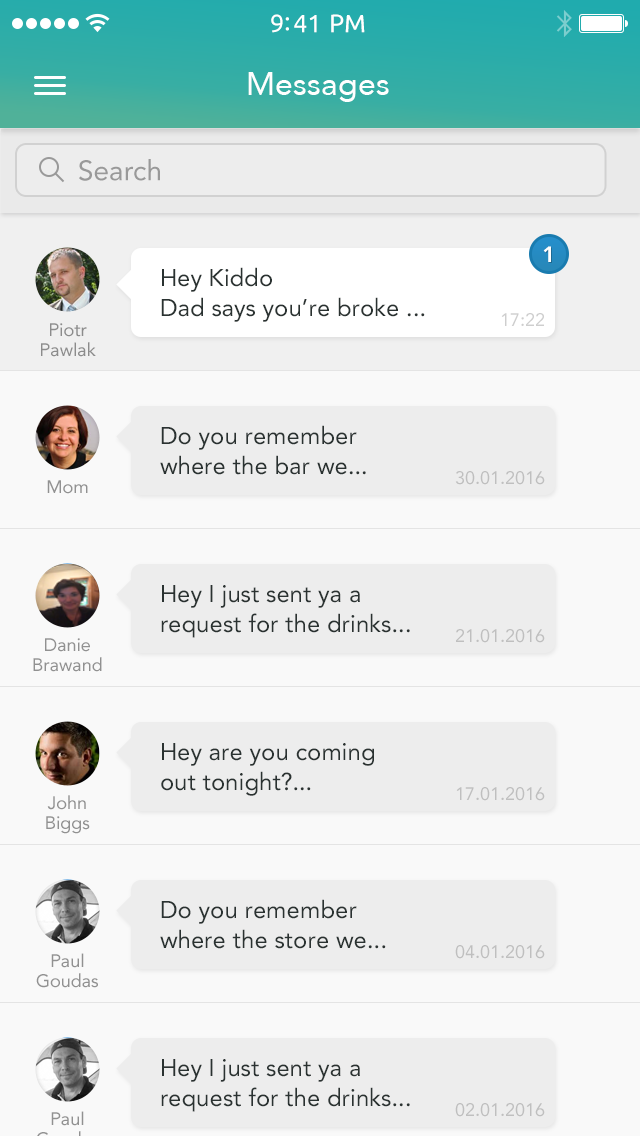
<style>
.page{position:relative;width:640px;height:1136px;background:#f9f9f9}
.page>*{position:absolute;margin:0}
.t1{font:25px "Ubuntu";color:#ffffff}
.t2{font:32px "Avenir-Roman";color:#ffffff}
.t3{font:28px "Avenir-Roman";color:#999999}
.t4{font:22px "Avenir-Heavy";color:#ffffff}
.t5{font:24px/30px "Avenir-Roman";color:#2a3231}
.t6{font:18px "Avenir-Roman";color:#cecece}
.t7{font:18px/20px "Avenir-Roman";color:#8c8c8c}
.t8{font:18px "Avenir-Roman";color:#bfbfbf}
.t9{font:18px "Avenir-Roman";color:#919191}
.t10{font:18px/20px "Avenir-Roman";color:#919191}
</style>
<div class="page">
<p class="t1" style="left:271px;top:14px;width:94px;height:19px">9:41 PM</p>
<p class="t2" style="left:248px;top:72px;width:141px;height:30px">Messages</p>
<p class="t3" style="left:79px;top:159px;width:81px;height:22px">Search</p>
<p class="t4" style="left:543px;top:246px;width:8px;height:16px">1</p>
<p class="t5" style="left:161px;top:267px;width:264px;height:55px">Hey Kiddo<br>Dad says you’re broke ...</p>
<p class="t6" style="left:501px;top:313px;width:43px;height:13px">17:22</p>
<p class="t7" style="left:41px;top:323px;width:55px;height:34px;text-align:center">Piotr Pawlak</p>
<p class="t5" style="left:160px;top:425px;width:206px;height:50px">Do you remember<br>where the bar we...</p>
<p class="t8" style="left:455px;top:471px;width:90px;height:14px">30.01.2016</p>
<p class="t9" style="left:47px;top:480px;width:41px;height:14px">Mom</p>
<p class="t5" style="left:161px;top:585px;width:249px;height:53px">Hey I just sent ya a<br>request for the drinks...</p>
<p class="t8" style="left:456px;top:629px;width:89px;height:14px">21.01.2016</p>
<p class="t10" style="left:33px;top:638px;width:69px;height:34px;text-align:center">Danie Brawand</p>
<p class="t5" style="left:161px;top:743px;width:213px;height:53px">Hey are you coming<br>out tonight?...</p>
<p class="t10" style="left:46px;top:795px;width:44px;height:39px;text-align:center">John Biggs</p>
<p class="t8" style="left:456px;top:787px;width:89px;height:14px">17.01.2016</p>
<p class="t5" style="left:160px;top:899px;width:226px;height:50px">Do you remember<br>where the store we...</p>
<p class="t10" style="left:36px;top:953px;width:62px;height:35px;text-align:center">Paul Goudas</p>
<p class="t8" style="left:455px;top:945px;width:90px;height:14px">04.01.2016</p>
<p class="t5" style="left:161px;top:1059px;width:249px;height:53px">Hey I just sent ya a<br>request for the drinks...</p>
<p class="t8" style="left:455px;top:1103px;width:90px;height:14px">02.01.2016</p>
</div>
